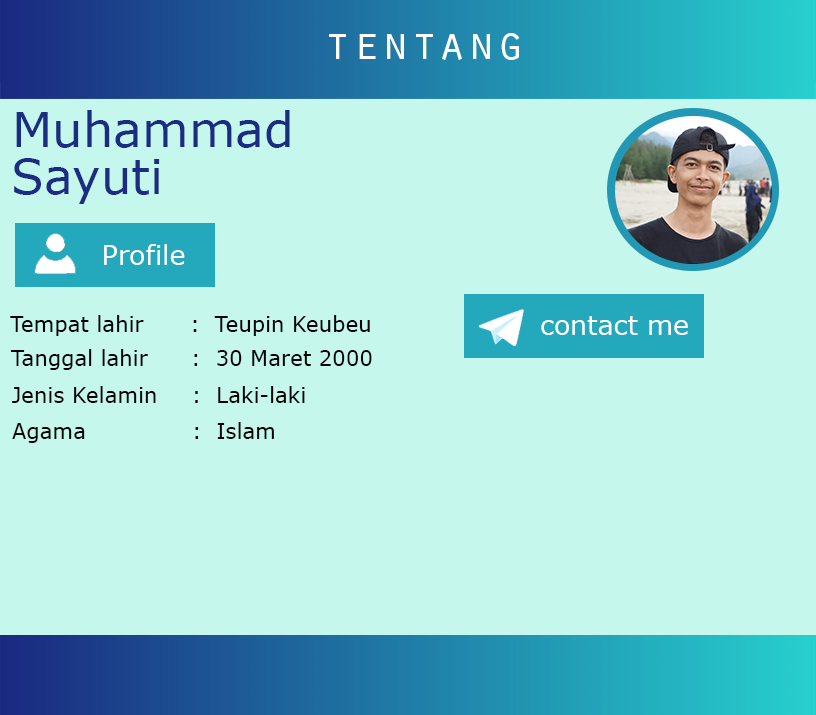
<style>
.page{position:relative;width:816px;height:715px;background:#c5f7ed}
.page>*{position:absolute;margin:0}
.t1{font:48.3px "OratorStd";color:#ffffff}
.t2{font:48px "Verdana";color:#1b2d83}
.t3{font:26.7px "Verdana";color:#fefefe}
.t4{font:21.3px "Verdana";color:#030303}
.t5{font:26.7px "Verdana";color:#ffffff}
</style>
<div class="page">
<p class="t1" style="left:329px;top:33px;width:191px;height:27px">tentang</p>
<p class="t2" style="left:16px;top:110px;width:274px;height:38px">Muhammad</p>
<p class="t2" style="left:14px;top:158px;width:146px;height:46px">Sayuti</p>
<p class="t3" style="left:104px;top:244px;width:81px;height:21px">Profile</p>
<p class="t4" style="left:10px;top:315px;width:360px;height:21px">Tempat lahir  :  Teupin Keubeu</p>
<p class="t5" style="left:541px;top:316px;width:147px;height:19px">contact me</p>
<p class="t4" style="left:10px;top:349px;width:362px;height:21px">Tanggal lahir  :  30 Maret 2000</p>
<p class="t4" style="left:12px;top:386px;width:293px;height:17px">Jenis Kelamin :  Laki-laki</p>
<p class="t4" style="left:12px;top:422px;width:262px;height:21px">Agama   :  Islam</p>
</div>
